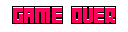
<style>
.page{position:relative;width:128px;height:32px;background:#ffffff}
.page>*{position:absolute;margin:0}
.t1{font:20px "04b19";color:#ff005a}
</style>
<div class="page">
<p class="t1" style="left:13px;top:7px;width:102px;height:16px">GAME OVER</p>
</div>
